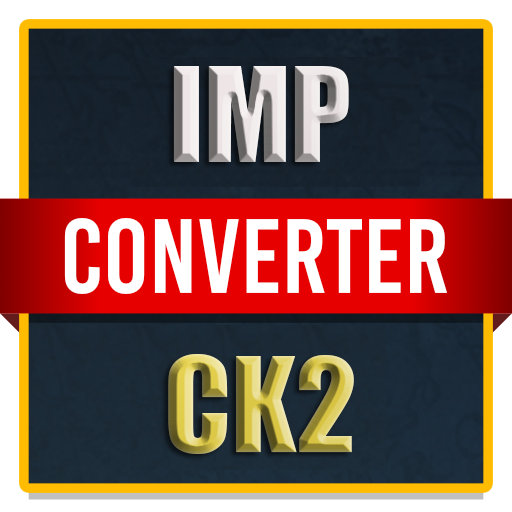
<style>
.page{position:relative;width:512px;height:512px}
.page>*{position:absolute;margin:0}
.t1{font:120.8px "Impact"}
</style>
<div class="page">
<p class="t1" style="left:168px;top:66px;width:186px;height:388px;text-align:center">IMP<br><br>CK2</p>
</div>
